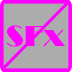
<style>
.page{position:relative;width:72px;height:72px;background:#acacac}
.page>*{position:absolute;margin:0}
.t1{font:30px "Broadway";color:#ff00ff}
</style>
<div class="page">
<p class="t1" style="left:6px;top:25px;width:60px;height:22px">SFx</p>
</div>
